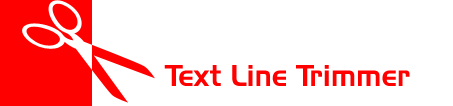
<style>
.page{position:relative;width:453px;height:106px;background:#ffffff}
.page>*{position:absolute;margin:0}
.t1{font:30px "Slicker";color:#ff0000}
</style>
<div class="page">
<p class="t1" style="left:164px;top:65px;width:246px;height:21px">Text Line Trimmer</p>
</div>
